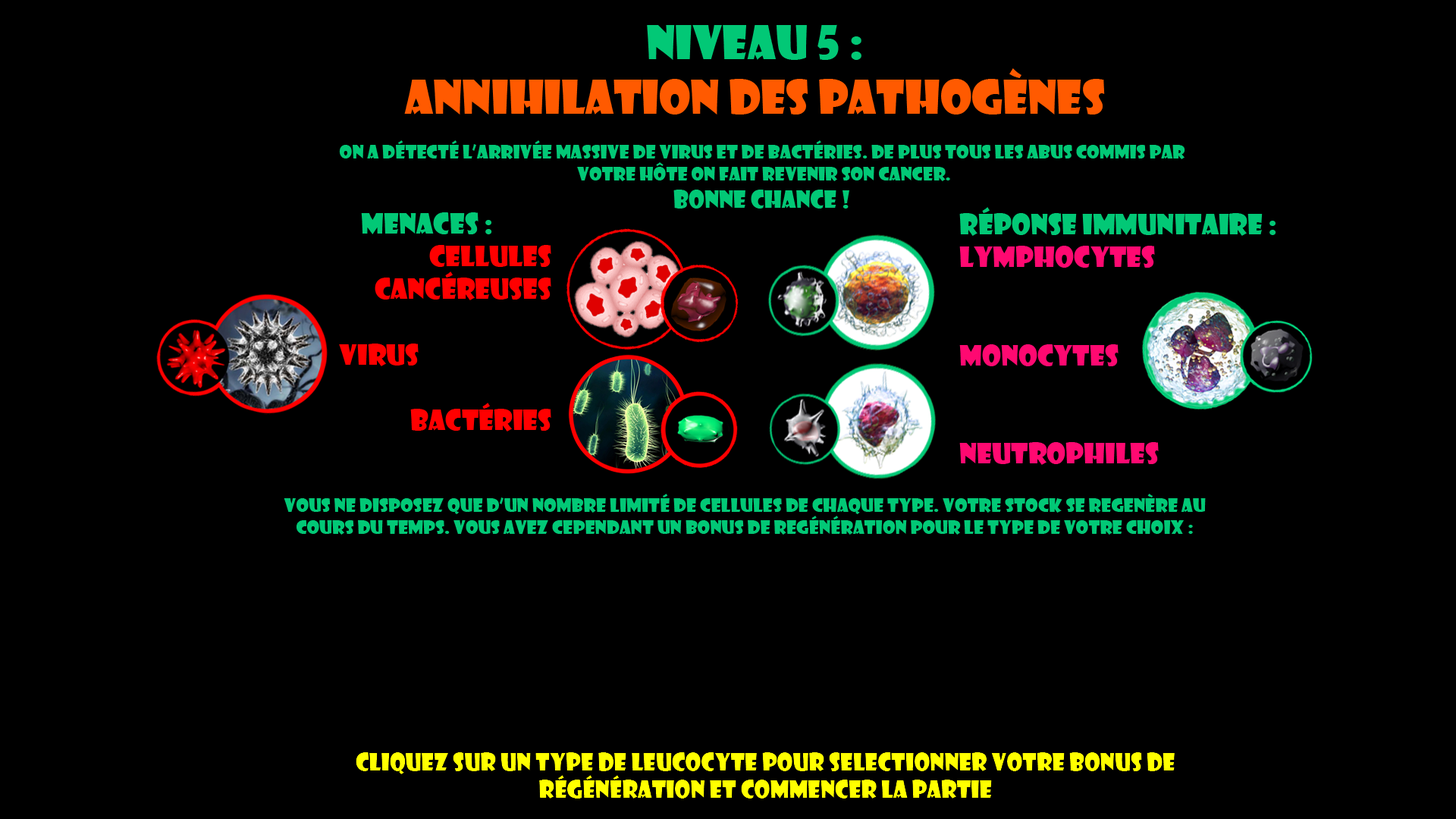
<style>
.page{position:relative;width:1456px;height:819px;background:#000000}
.page>*{position:absolute;margin:0}
.t1{font:45.5px "ShowcardGothic-Reg";color:#ff5a00}
.t2{font:45.5px "ShowcardGothic-Reg";color:#02c876}
.t3{font:18.2px "ShowcardGothic-Reg";color:#02c876}
.t4{font:22.7px "ShowcardGothic-Reg";color:#02c876}
.t5{font:27.3px "ShowcardGothic-Reg";color:#ff0971}
.t6{font:27.3px "ShowcardGothic-Reg";color:#02c876}
.t7{font:27.3px "ShowcardGothic-Reg";color:#ff0000}
</style>
<div class="page">
<p class="t1" style="left:404px;top:24px;width:701px;height:91px;text-align:center"><span class="t2">Niveau 5 : <br></span>ANNIHILATION DES PATHOGènes</p>
<p class="t3" style="left:339px;top:140px;width:846px;height:69px;text-align:center">ON a détecté l’arrivée massive de virus et de bactéries. De plus tous les abus commis par<br> votre hôte on fait revenir son cancer.<br><span class="t4">BONNE CHANCE !</span></p>
<p class="t5" style="left:959px;top:207px;width:317px;height:258px"><span class="t6">Réponse immunitaire :<br></span>LYMPHOCYTES<br><br><br>Monocytes<br><br><br>Neutrophiles</p>
<p class="t7" style="left:339px;top:212px;width:212px;height:219px"><span class="t6">                                      Menaces :          <br></span>CEllules <br>cancéreuses<br><br>                                  virus<br><br>Bactéries</p>
<p class="t3" style="left:284px;top:494px;width:922px;height:41px;text-align:center">VOUS NE DISPOSEZ QUE D’un nombre limité de cellules de chaque type. Votre stock se regenère au cours du temps. Vous avez cependant un bonus de regénération pour le type de votre choix :</p>
</div>
